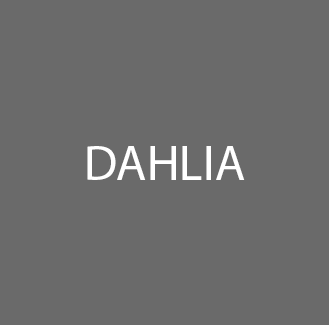
<style>
.page{position:relative;width:329px;height:325px;background:#6a6a6a}
.page>*{position:absolute;margin:0}
.t1{font:50px "MyriadPro-Regular";color:#ffffff;text-transform:uppercase}
</style>
<div class="page">
<p class="t1" style="left:87px;top:146px;width:158px;height:34px">Dahlia</p>
</div>
